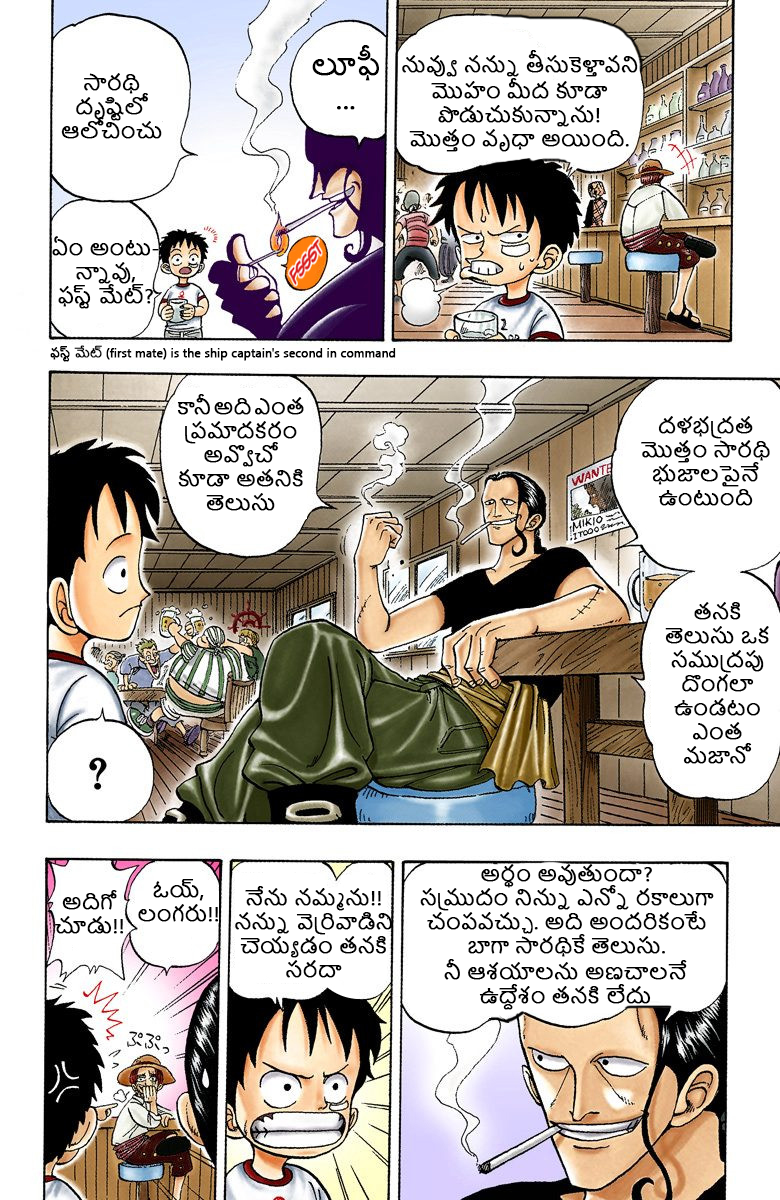
<style>
.page{position:relative;width:780px;height:1200px;background:#ffffff}
.page>*{position:absolute;margin:0}
.t1{font:28px "NirmalaUI";color:#000000;font-weight:bold}
.t2{font:20px "NirmalaUI";color:#000000;font-weight:bold}
.t3{font:12px "NirmalaUI";color:#000000;font-weight:bold}
</style>
<div class="page">
<p class="t1" style="left:312px;top:45px;width:67px;height:65px;text-align:center">లూఫీ<br>...</p>
<p class="t2" style="left:402px;top:50px;width:236px;height:27px">నువ్వు నన్ను తీసుకెళ్తావని</p>
<p class="t2" style="left:61px;top:73px;width:101px;height:66px;text-align:center">సారథి దృష్టిలో ఆలోచించు</p>
<p class="t2" style="left:409px;top:78px;width:220px;height:74px;text-align:center">మొహం మీద కూడా పొడుచుకున్నాను! <br>మొత్తం వృధా అయింది.</p>
<p class="t2" style="left:52px;top:236px;width:107px;height:73px;text-align:center">ఏం అంటు-<br>న్నావు, <br>ఫస్ట్ మేట్?</p>
<p class="t3" style="left:50px;top:345px;width:346px;height:17px">ఫస్ట్ మేట్ (first mate) is the ship captain's second in command</p>
<p class="t2" style="left:177px;top:394px;width:127px;height:117px;text-align:center">కానీ అది ఎంత ప్రమాదకరం అవ్వొచో కూడా అతనికి తెలుసు</p>
<p class="t2" style="left:641px;top:416px;width:129px;height:90px;text-align:center">దళభద్రత మొత్తం సారథి భుజాలపైనే ఉంటుంది</p>
<p class="t2" style="left:665px;top:602px;width:104px;height:162px;text-align:center">తనకి తెలుసు ఒక సముద్రపు దొంగలా ఉండటం ఎంత మజానో</p>
<p class="t2" style="left:420px;top:864px;width:294px;height:93px;text-align:center">అర్థం అవుతుందా? <br>సముద్రం నిన్ను ఎన్నో రకాలుగా చంపవచ్చు. అది అందరికంటే బాగా సారథికే తెలుసు.</p>
<p class="t2" style="left:138px;top:879px;width:81px;height:43px;text-align:center">ఓయ్, లంగరు!!</p>
<p class="t2" style="left:55px;top:890px;width:69px;height:44px;text-align:center">అదిగో చూడు!!</p>
<p class="t2" style="left:235px;top:886px;width:157px;height:92px;text-align:center">నేను నమ్మను!! నన్ను వెర్రివాడిని చెయ్యడం తనకి సరదా</p>
<p class="t2" style="left:444px;top:959px;width:243px;height:51px;text-align:center">నీ ఆశయాలను అణచాలనే ఉద్దేశం తనకి లేదు</p>
</div>
